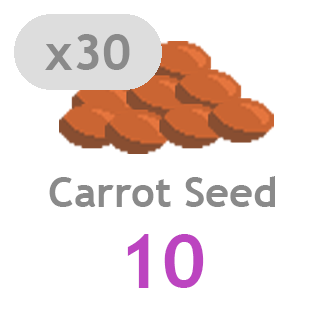
<style>
.page{position:relative;width:327px;height:327px;background:#ffffff}
.page>*{position:absolute;margin:0}
.t1{font:50px "TrebuchetMS-Bold";color:#8a8a8a}
.t2{font:41.7px "TrebuchetMS-Bold";color:#8a8a8a}
.t3{font:75px "TrebuchetMS-Bold";color:#bc44c0}
</style>
<div class="page">
<p class="t1" style="left:45px;top:34px;width:85px;height:36px">x30</p>
<p class="t2" style="left:49px;top:176px;width:226px;height:31px">Carrot Seed</p>
<p class="t3" style="left:127px;top:234px;width:77px;height:54px">10</p>
</div>
